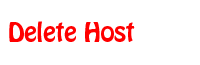
<style>
.page{position:relative;width:200px;height:65px;background:#ffffff}
.page>*{position:absolute;margin:0}
.t1{font:24px "HoboStd";color:#ff0000}
</style>
<div class="page">
<p class="t1" style="left:9px;top:21px;width:126px;height:21px">Delete Host</p>
</div>
